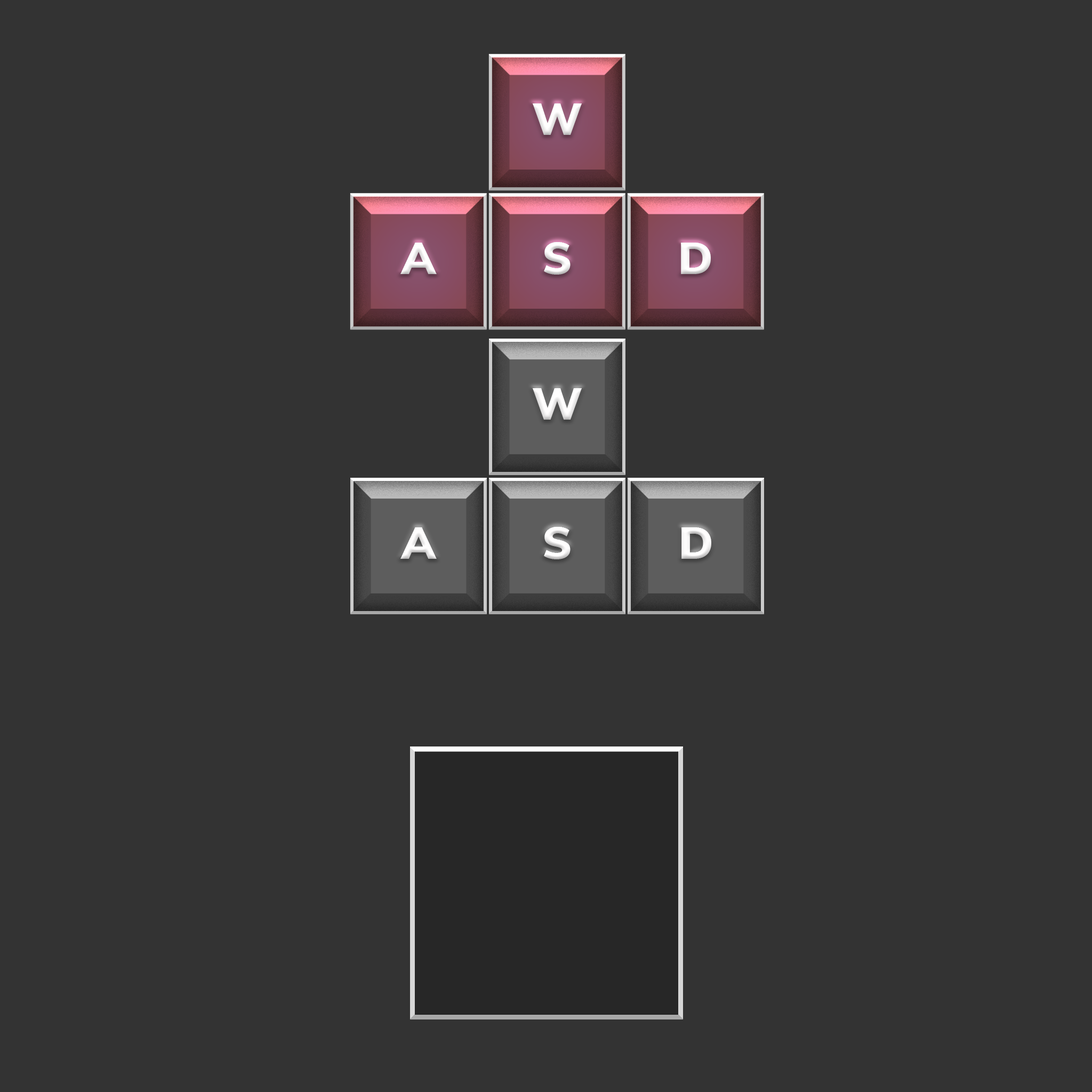
<style>
.page{position:relative;width:1092px;height:1092px;background:#333333}
.page>*{position:absolute;margin:0}
.t1{font:44.3px "Muli-Black";color:#fffefe}
</style>
<div class="page">
<p class="t1" style="left:533px;top:103px;width:49px;height:32px">W</p>
<p class="t1" style="left:400px;top:243px;width:37px;height:31px">A</p>
<p class="t1" style="left:544px;top:242px;width:27px;height:33px">S</p>
<p class="t1" style="left:681px;top:243px;width:30px;height:31px">D</p>
<p class="t1" style="left:533px;top:388px;width:49px;height:32px">W</p>
<p class="t1" style="left:400px;top:527px;width:37px;height:32px">A</p>
<p class="t1" style="left:544px;top:527px;width:27px;height:32px">S</p>
<p class="t1" style="left:681px;top:527px;width:30px;height:32px">D</p>
</div>
